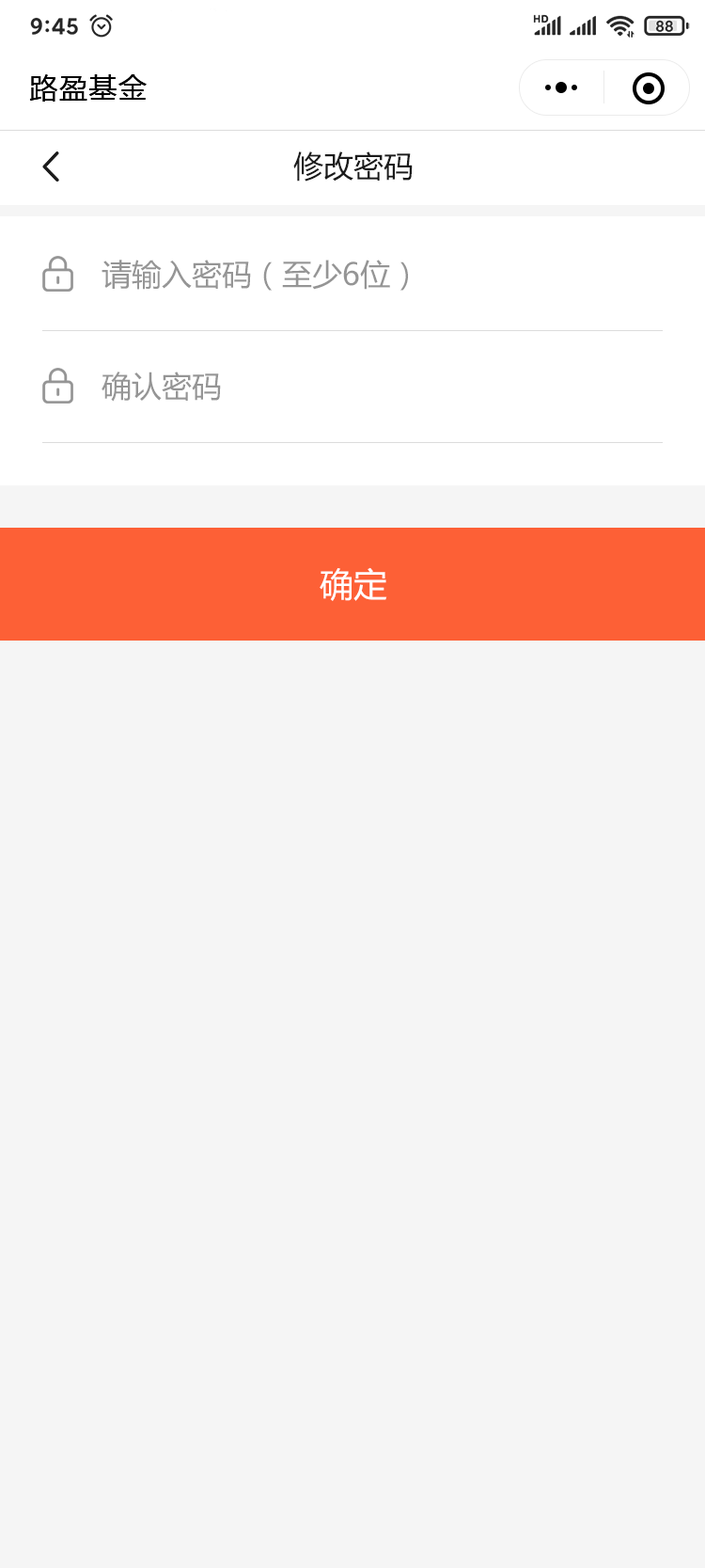
<style>
.page{position:relative;width:705px;height:1568px;background:#f5f5f5}
.page>*{position:absolute;margin:0}
.t1{font:28.2px "MicrosoftYaHei";letter-spacing:0.05em;color:#000000}
.t2{font:30.1px "MicrosoftYaHei";color:#1b1b1b}
.t3{font:30.1px "MicrosoftYaHei";color:#959595}
.t4{font:33.9px "MicrosoftYaHei";color:#ffffff}
</style>
<div class="page">
<p class="t1" style="left:29px;top:74px;width:118px;height:28px">路盈基金</p>
<p class="t2" style="left:293px;top:151px;width:120px;height:31px">修改密码</p>
<p class="t3" style="left:102px;top:260px;width:306px;height:31px">请输入密码（至少6位）</p>
<p class="t3" style="left:102px;top:372px;width:119px;height:30px">确认密码</p>
<p class="t4" style="left:320px;top:567px;width:68px;height:34px">确定</p>
</div>
